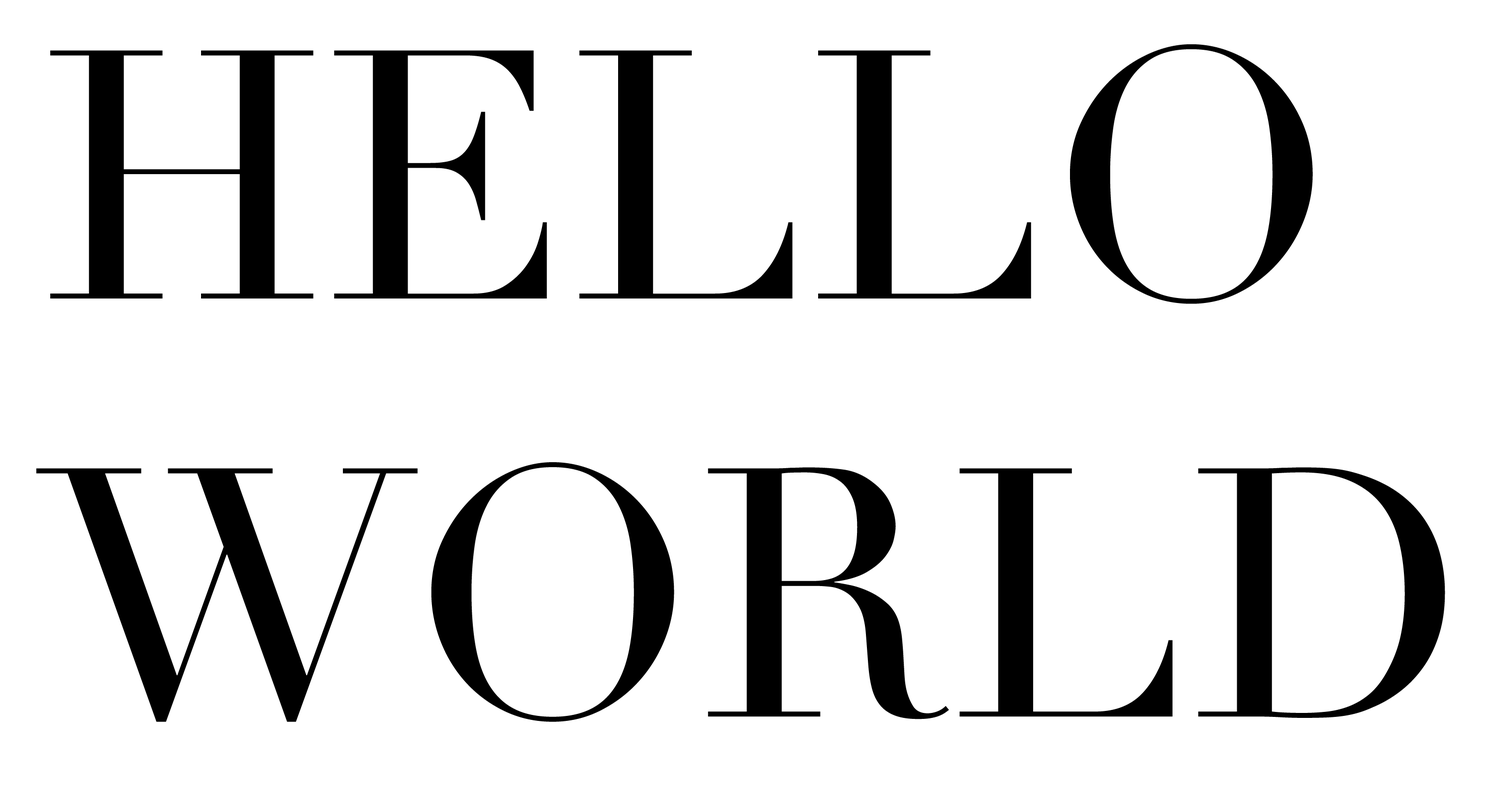
<style>
.page{position:relative;width:1493px;height:798px;background:#ffffff}
.page>*{position:absolute;margin:0}
.t1{font:348.5px "Didot";color:#000000}
</style>
<div class="page">
<p class="t1" style="left:36px;top:44px;width:1410px;height:678px">HELLO<br>WORLD</p>
</div>
